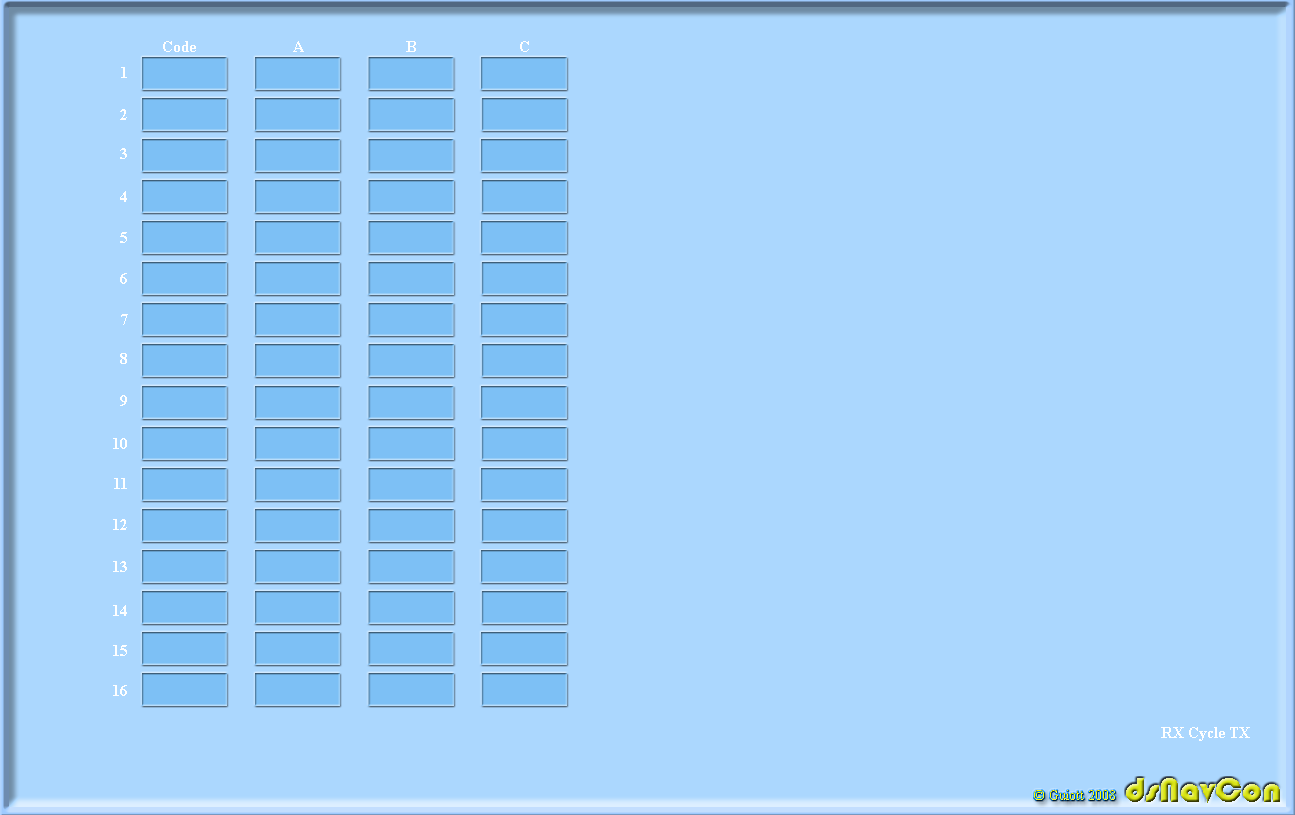
<style>
.page{position:relative;width:1295px;height:815px;background:#abd7fe}
.page>*{position:absolute;margin:0}
.t1{font:16px "TimesNewRomanPS-BoldMT";color:#ffffff}
.t2{font:36px "Bauhaus93"}
.t3{font:14px "TimesNewRomanPSMT"}
</style>
<div class="page">
<p class="t1" style="left:163px;top:41px;width:33px;height:11px">Code</p>
<p class="t1" style="left:293px;top:41px;width:11px;height:11px">A</p>
<p class="t1" style="left:406px;top:41px;width:10px;height:11px">B</p>
<p class="t1" style="left:520px;top:41px;width:9px;height:11px">C</p>
<p class="t1" style="left:121px;top:67px;width:6px;height:11px">1</p>
<p class="t1" style="left:120px;top:109px;width:7px;height:11px">2</p>
<p class="t1" style="left:120px;top:148px;width:7px;height:11px">3</p>
<p class="t1" style="left:120px;top:191px;width:7px;height:11px">4</p>
<p class="t1" style="left:120px;top:232px;width:7px;height:11px">5</p>
<p class="t1" style="left:120px;top:273px;width:7px;height:11px">6</p>
<p class="t1" style="left:121px;top:314px;width:7px;height:11px">7</p>
<p class="t1" style="left:120px;top:353px;width:7px;height:11px">8</p>
<p class="t1" style="left:120px;top:395px;width:7px;height:11px">9</p>
<p class="t1" style="left:113px;top:438px;width:14px;height:11px">10</p>
<p class="t1" style="left:114px;top:478px;width:13px;height:11px">11</p>
<p class="t1" style="left:113px;top:519px;width:14px;height:11px">12</p>
<p class="t1" style="left:113px;top:561px;width:14px;height:11px">13</p>
<p class="t1" style="left:113px;top:605px;width:14px;height:11px">14</p>
<p class="t1" style="left:113px;top:645px;width:14px;height:11px">15</p>
<p class="t1" style="left:113px;top:685px;width:14px;height:11px">16</p>
<p class="t1" style="left:1161px;top:727px;width:23px;height:11px">RX</p>
<p class="t1" style="left:1189px;top:727px;width:36px;height:14px">Cycle</p>
<p class="t1" style="left:1230px;top:727px;width:20px;height:11px">TX</p>
<p class="t2" style="left:1126px;top:778px;width:154px;height:25px">dsNavCon</p>
<p class="t3" style="left:1034px;top:790px;width:81px;height:10px">© Guiott 2008</p>
</div>
